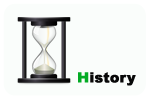
<style>
.page{position:relative;width:150px;height:100px;background:#fafdfb}
.page>*{position:absolute;margin:0}
.t1{font:14px "Arial-Black";color:#080808;font-weight:bold}
.t2{font:14px "Arial-Black";color:#03ab24;font-weight:bold}
</style>
<div class="page">
<p class="t1" style="left:78px;top:72px;width:58px;height:14px"><span class="t2">H</span>istory</p>
</div>
